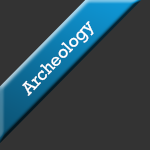
<style>
.page{position:relative;width:150px;height:150px;background:#333333}
.page>*{position:absolute;margin:0}
.t1{font:18px "Rockwell";color:#ffffff}
</style>
<div class="page">
<p class="t1" style="left:22px;top:21px;width:72px;height:75px;rotate:-47deg">Archeology</p>
</div>
